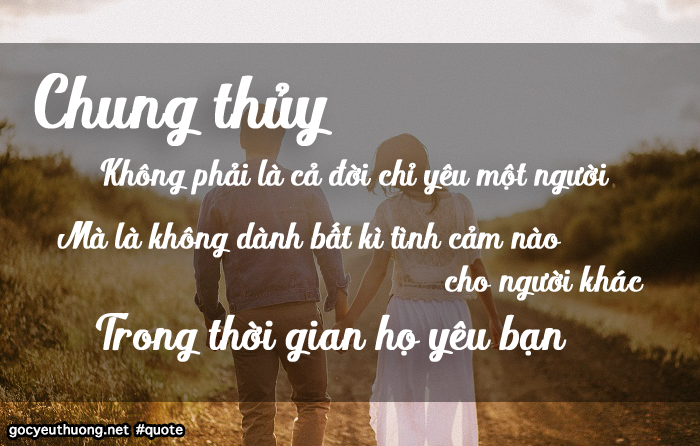
<style>
.page{position:relative;width:700px;height:446px}
.page>*{position:absolute;margin:0}
.t1{font:72px "SVN-ShintiaScript";color:#ffffff;font-weight:bold}
.t2{font:36px "SVN-ShintiaScript";color:#ffffff;font-weight:bold}
.t3{font:48px "SVN-ShintiaScript";color:#ffffff;font-weight:bold}
.t4{font:18px "AppleSymbols";color:#ffffff;font-weight:bold}
</style>
<div class="page">
<p class="t1" style="left:34px;top:73px;width:298px;height:73px">Chung thủy</p>
<p class="t2" style="left:100px;top:158px;width:509px;height:37px">Không phải là cả đời chỉ yêu một người</p>
<p class="t2" style="left:57px;top:221px;width:587px;height:80px">Mà là không dành bất kì tình cảm nào        <br>                                             cho người khác</p>
<p class="t3" style="left:95px;top:313px;width:472px;height:49px">Trong thời gian họ yêu bạn</p>
<p class="t4" style="left:9px;top:424px;width:174px;height:14px">gocyeuthuong.net #quote</p>
</div>
